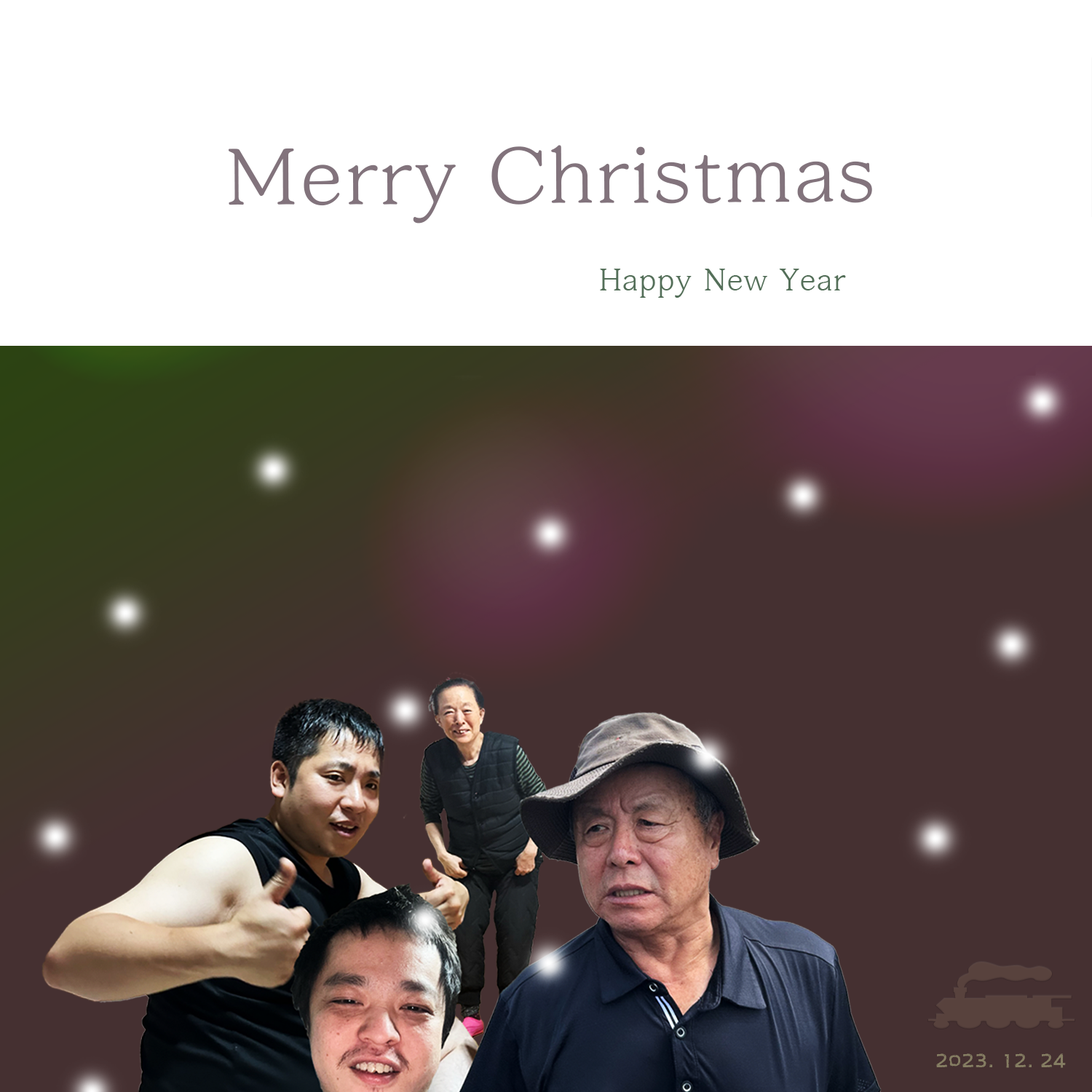
<style>
.page{position:relative;width:1092px;height:1092px;background:#ffffff}
.page>*{position:absolute;margin:0}
.t1{font:84.6px "MapoGoldenPier";color:#82737c}
.t2{font:18.5px "H2mkpB";color:#857d62}
</style>
<div class="page">
<p class="t1" style="left:228px;top:145px;width:644px;height:78px">Merry Christmas</p>
<p class="t2" style="left:936px;top:1053px;width:130px;height:15px">2023. 12. 24</p>
</div>
